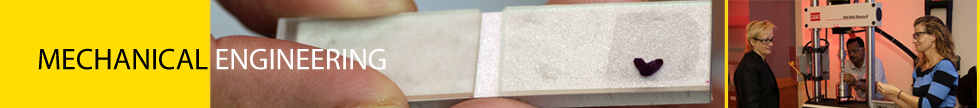
<style>
.page{position:relative;width:980px;height:108px}
.page>*{position:absolute;margin:0}
.t1{font:30px "MyriadPro-Regular";color:#fefefe;text-transform:uppercase}
.t2{font:30px "MyriadPro-Regular";color:#000000;text-transform:uppercase}
</style>
<div class="page">
<p class="t1" style="left:38px;top:48px;width:348px;height:22px"><span class="t2">Mechanical </span>Engineering</p>
</div>
